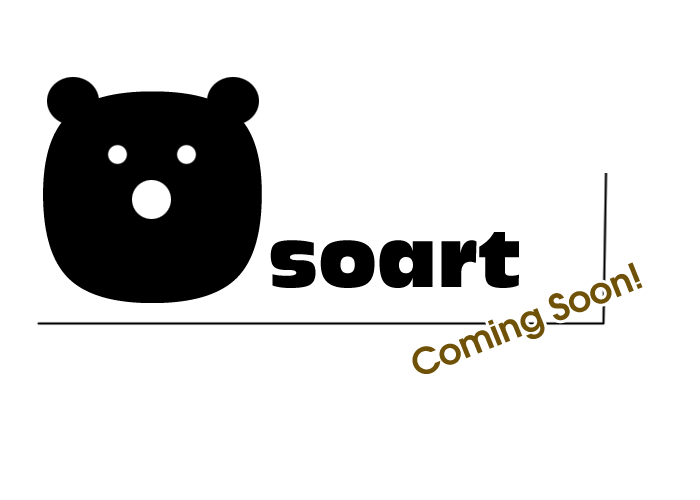
<style>
.page{position:relative;width:700px;height:500px;background:#ffffff}
.page>*{position:absolute;margin:0}
.t1{font:272px "AntiqueOliveCompact-Regular";color:#000000}
.t2{font:72px "AntiqueOliveCompact-Regular";color:#000000}
.t3{font:36px "AvantGarde-Demi";color:#6f5107}
</style>
<div class="page">
<p class="t1" style="left:43px;top:91px;width:219px;height:212px">O</p>
<p class="t2" style="left:270px;top:232px;width:249px;height:56px">soart</p>
<p class="t3" style="left:412px;top:262px;width:231px;height:112px;rotate:-22deg">Coming Soon!</p>
</div>
